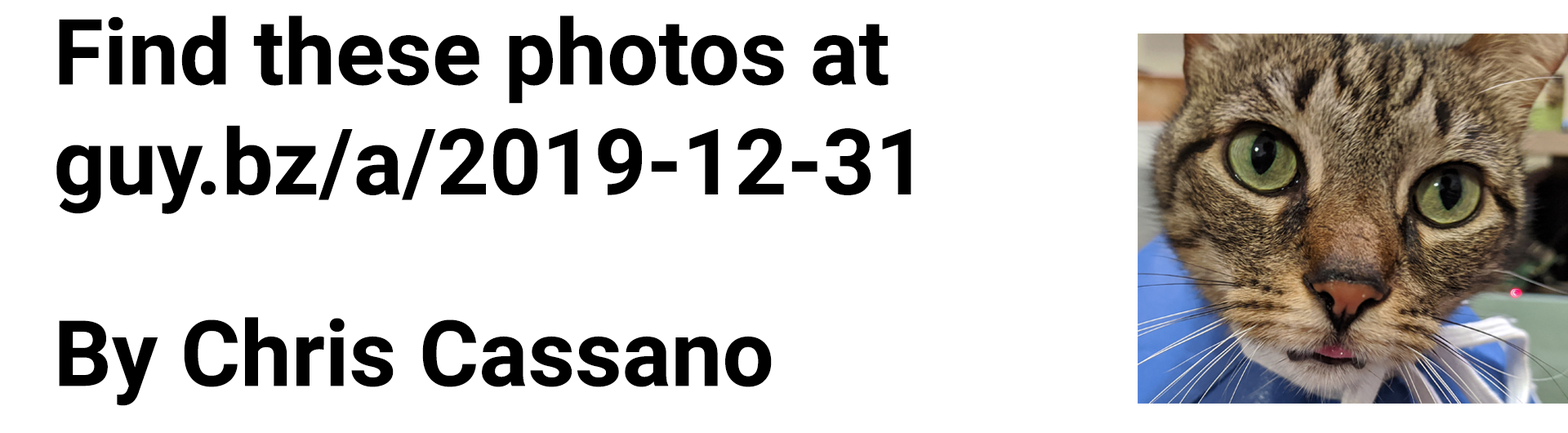
<style>
.page{position:relative;width:1568px;height:433px;background:#ffffff}
.page>*{position:absolute;margin:0}
.t1{font:91.5px "Roboto-Bold";color:#000000}
.t2{font:91.5px/81.7px "Roboto-Bold";color:#000000}
</style>
<div class="page">
<p class="t1" style="left:56px;top:16px;width:855px;height:390px">Find these photos at<br>guy.bz/a/2019-12-31<br><br><span class="t2">By Chris Cassano</span></p>
</div>
